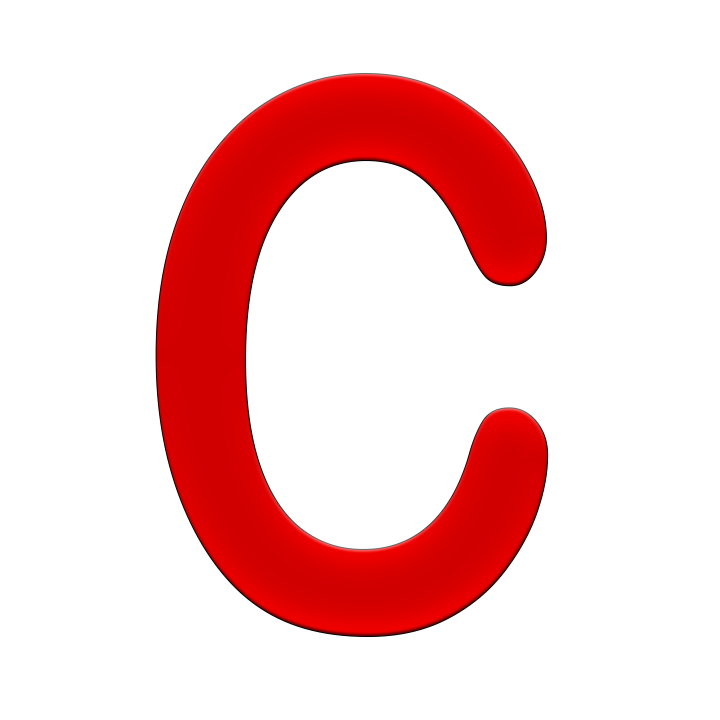
<style>
.page{position:relative;width:720px;height:720px;background:#ffffff}
.page>*{position:absolute;margin:0}
.t1{font:763.3px "ArialRoundedMTBold";color:#d40000;scale:0.81 1}
</style>
<div class="page">
<p class="t1" style="left:155px;top:73px;width:394px;height:564px">C</p>
</div>
